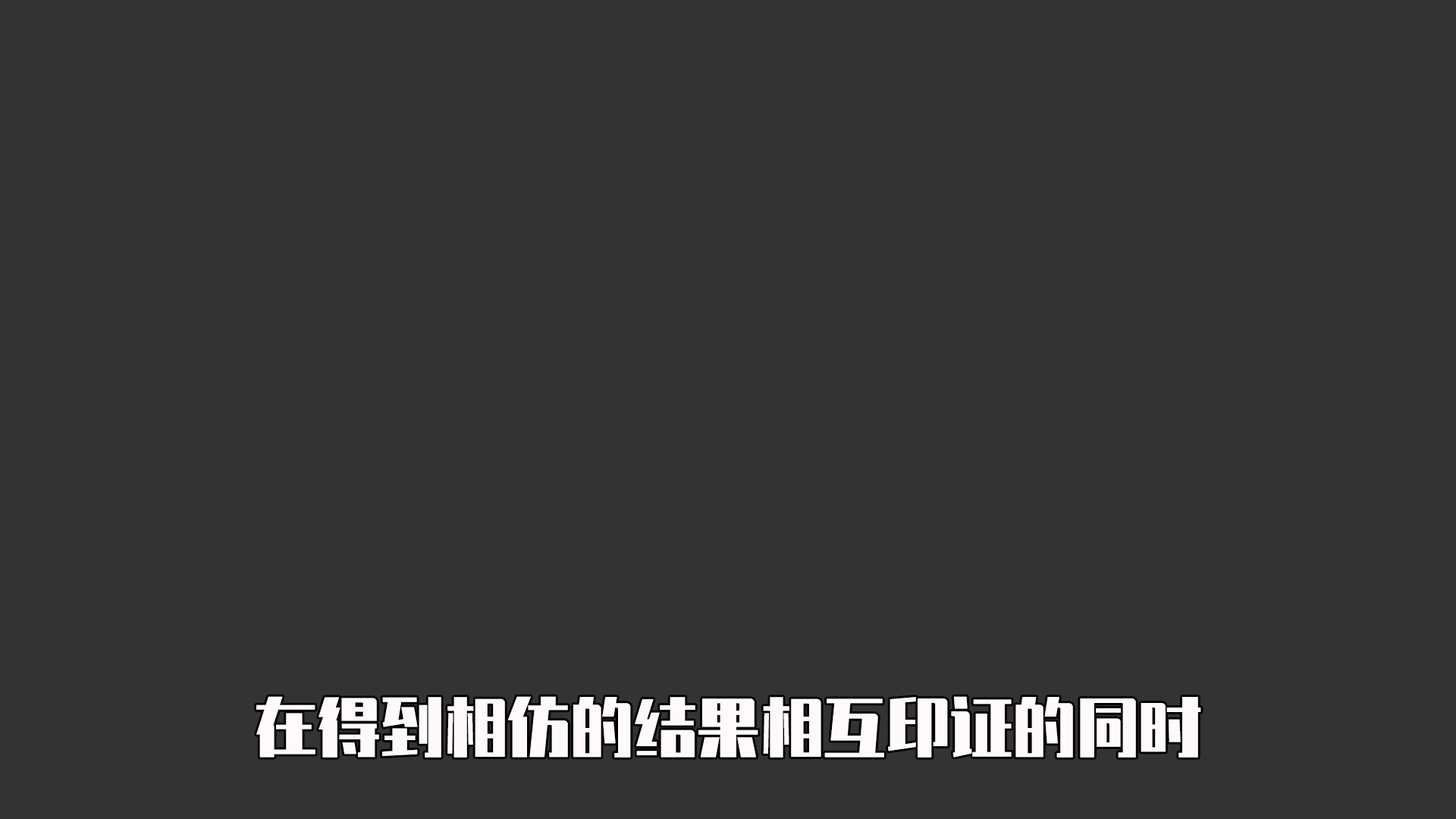
<style>
.page{position:relative;width:1456px;height:819px;background:#333333}
.page>*{position:absolute;margin:0}
.t1{font:63.2px "ZhenyanGB-Regular";color:#fefafa}
</style>
<div class="page">
<p class="t1" style="left:256px;top:696px;width:945px;height:62px">在得到相仿的结果相互印证的同时</p>
</div>
